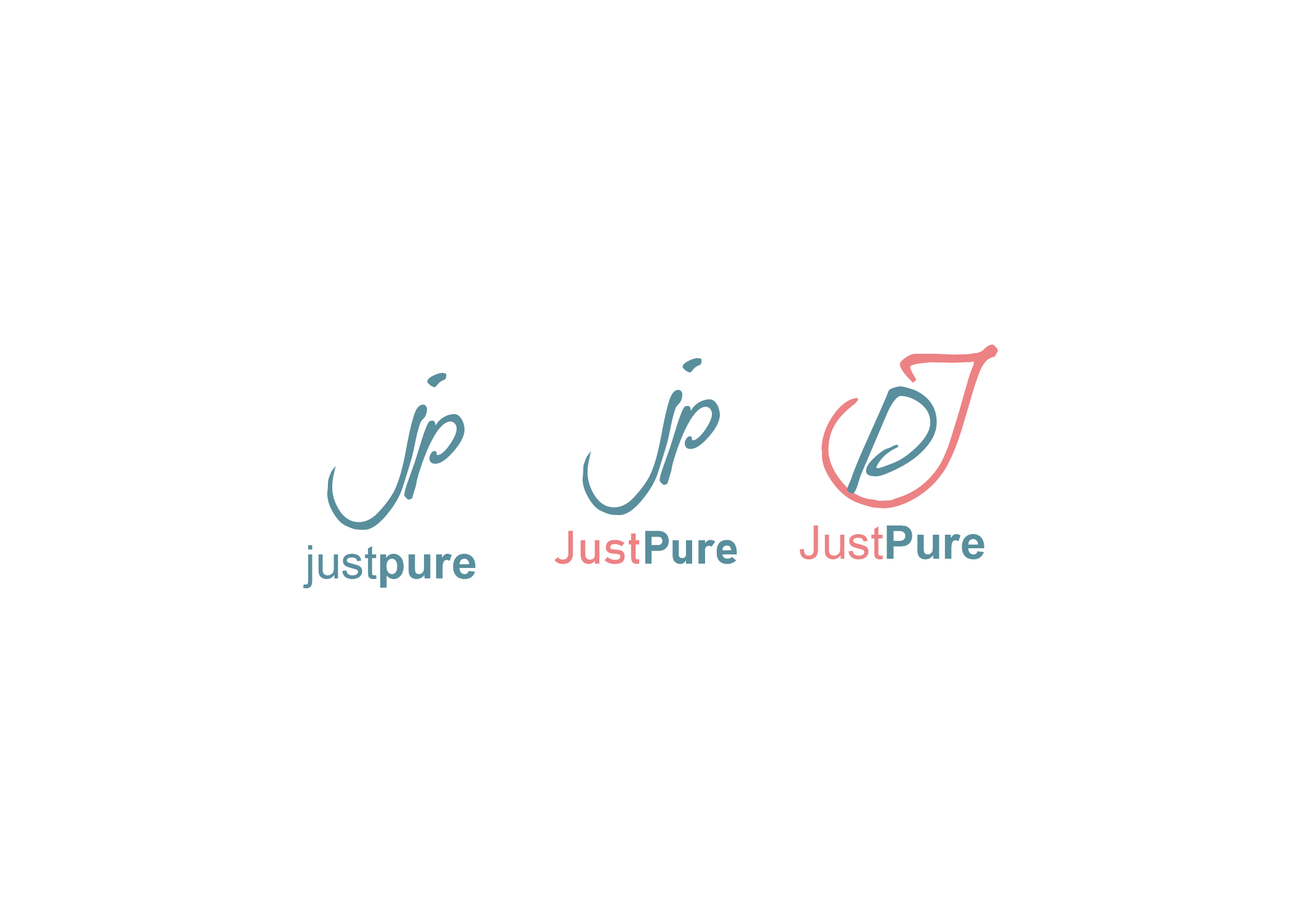
<style>
.page{position:relative;width:1292px;height:923px;background:#ffffff}
.page>*{position:absolute;margin:0}
.t1{font:123.1px "DearJoe5CASUAL";color:#ec8284}
.t2{font:123.1px "DearJoe5CASUAL";color:#598e9d}
.t3{font:46.1px "Bahnschrift";color:#ec8284}
.t4{font:46.1px "Bahnschrift-Bold";color:#598e9d}
.t5{font:46.1px "ArialMT";color:#ec8284}
.t6{font:46.1px "Arial-BoldMT";color:#598e9d}
.t7{font:46.1px "ArialMT";color:#598e9d}
</style>
<div class="page">
<p class="t1" style="left:821px;top:345px;width:178px;height:163px">J</p>
<p class="t2" style="left:582px;top:358px;width:120px;height:157px">j</p>
<p class="t2" style="left:327px;top:373px;width:120px;height:157px">j</p>
<p class="t2" style="left:847px;top:386px;width:90px;height:107px">P</p>
<p class="t2" style="left:660px;top:399px;width:60px;height:86px">p</p>
<p class="t2" style="left:404px;top:414px;width:61px;height:86px">p</p>
<p class="t3" style="left:554px;top:530px;width:183px;height:34px">Just<span class="t4">Pure</span></p>
<p class="t5" style="left:800px;top:525px;width:184px;height:34px">Just<span class="t6">Pure</span></p>
<p class="t7" style="left:303px;top:545px;width:173px;height:43px">just<span class="t6">pure</span></p>
</div>
